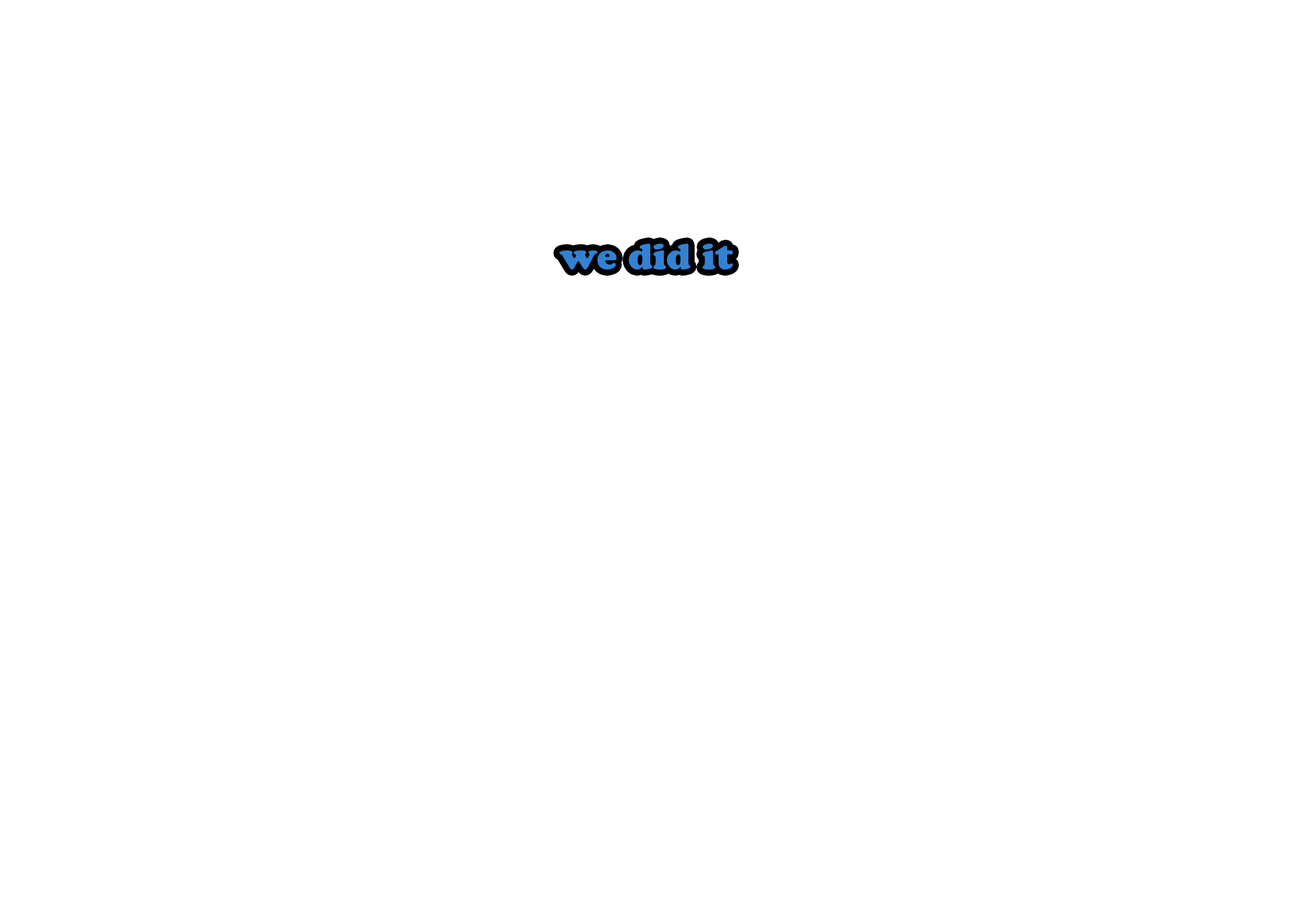
<style>
.page{position:relative;width:1292px;height:923px;background:#ffffff}
.page>*{position:absolute;margin:0}
.t1{font:35.9px "CooperBlackStd";color:#3381d1}
</style>
<div class="page">
<p class="t1" style="left:559px;top:244px;width:174px;height:25px">we did it</p>
</div>
